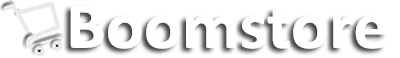
<style>
.page{position:relative;width:400px;height:58px;background:#ffffff}
.page>*{position:absolute;margin:0}
.t1{font:65.9px "Calibri-Bold";color:#ffffff;scale:1.07 1}
</style>
<div class="page">
<p class="t1" style="left:70px;top:6px;width:317px;height:43px">Boomstore</p>
</div>
